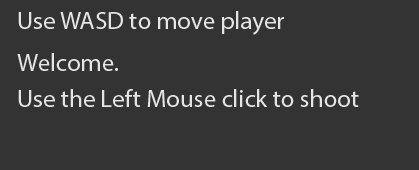
<style>
.page{position:relative;width:419px;height:170px;background:#333333}
.page>*{position:absolute;margin:0}
.t1{font:25px "MyriadPro-Regular";color:#e5e5e5}
</style>
<div class="page">
<p class="t1" style="left:18px;top:11px;width:266px;height:24px">Use WASD to move player</p>
<p class="t1" style="left:17px;top:53px;width:101px;height:18px">Welcome.</p>
<p class="t1" style="left:18px;top:89px;width:341px;height:18px">Use the Left Mouse click to shoot</p>
</div>
